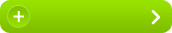
<style>
.page{position:relative;width:172px;height:33px}
.page>*{position:absolute;margin:0}
.t1{font:20.6px "MyriadPro-Bold";color:#ffffff}
</style>
<div class="page">
<p class="t1" style="left:13px;top:11px;width:11px;height:11px">+</p>
</div>
